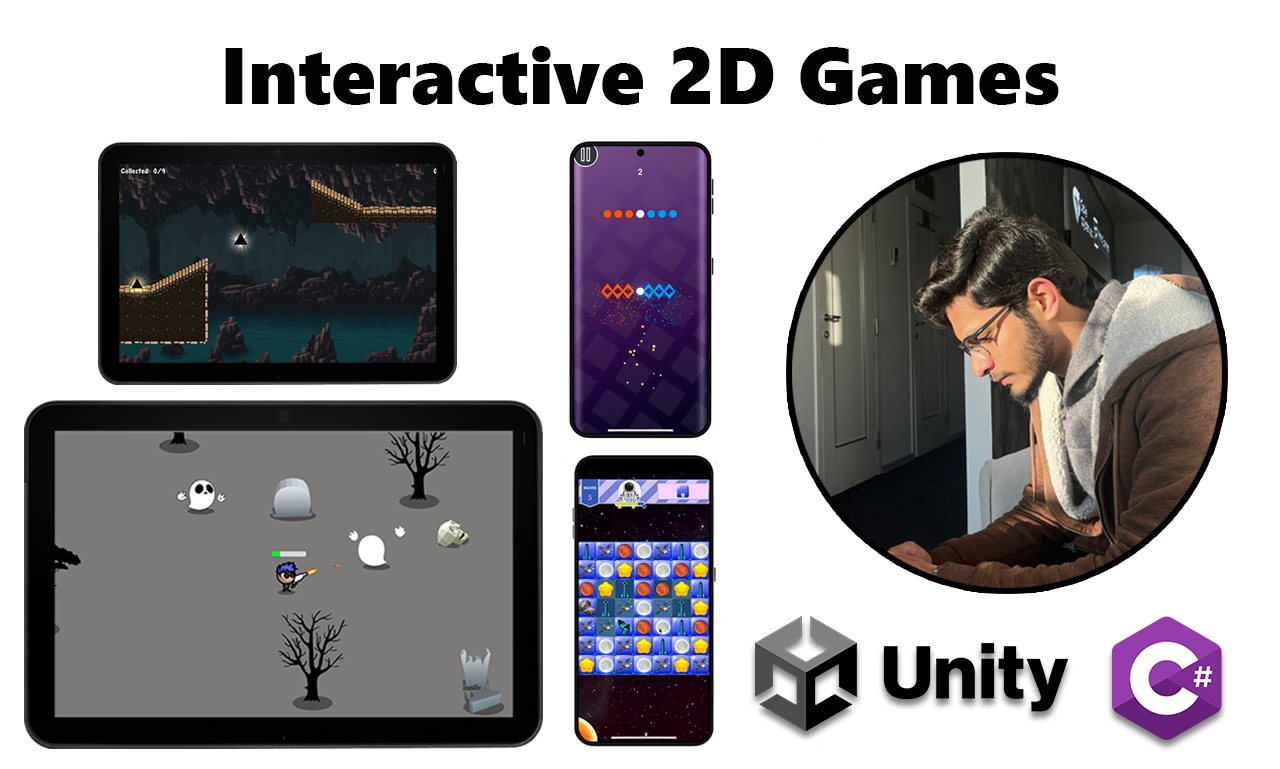
<style>
.page{position:relative;width:1280px;height:769px;background:#ffffff}
.page>*{position:absolute;margin:0}
.t1{font:80px "SegoeUIBlack";color:#020202}
</style>
<div class="page">
<p class="t1" style="left:225px;top:46px;width:834px;height:59px">Interactive 2D Games</p>
</div>
